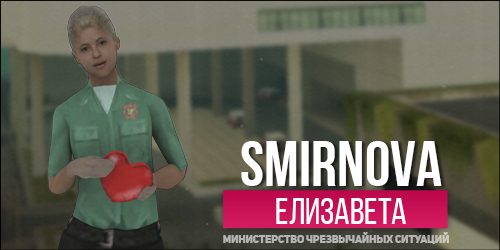
<style>
.page{position:relative;width:500px;height:250px}
.page>*{position:absolute;margin:0}
.t1{font:64.4px "BebasNeueCyrillic";color:#ffffff}
.t2{font:36.8px "BebasNeueRegular";color:#ffffff}
.t3{font:10.6px "UniSansHeavyCaps";color:#b5b5b3}
</style>
<div class="page">
<p class="t1" style="left:241px;top:141px;width:201px;height:45px">SMIRNOVA</p>
<p class="t2" style="left:276px;top:198px;width:130px;height:26px">ЕЛИЗАВЕТА</p>
<p class="t3" style="left:223px;top:232px;width:226px;height:12px">МИНИСТЕРСТВО ЧРЕЗВЫЧАЙНЫХ СИТУАЦИЙ</p>
</div>
